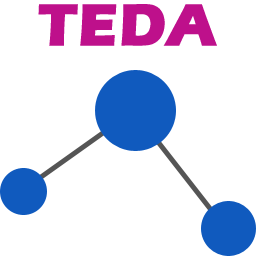
<style>
.page{position:relative;width:256px;height:256px;background:#ffffff}
.page>*{position:absolute;margin:0}
.t1{font:60px "ErasITC-Bold";color:#be108b;font-weight:bold}
</style>
<div class="page">
<p class="t1" style="left:38px;top:4px;width:179px;height:42px">TEDA</p>
</div>
